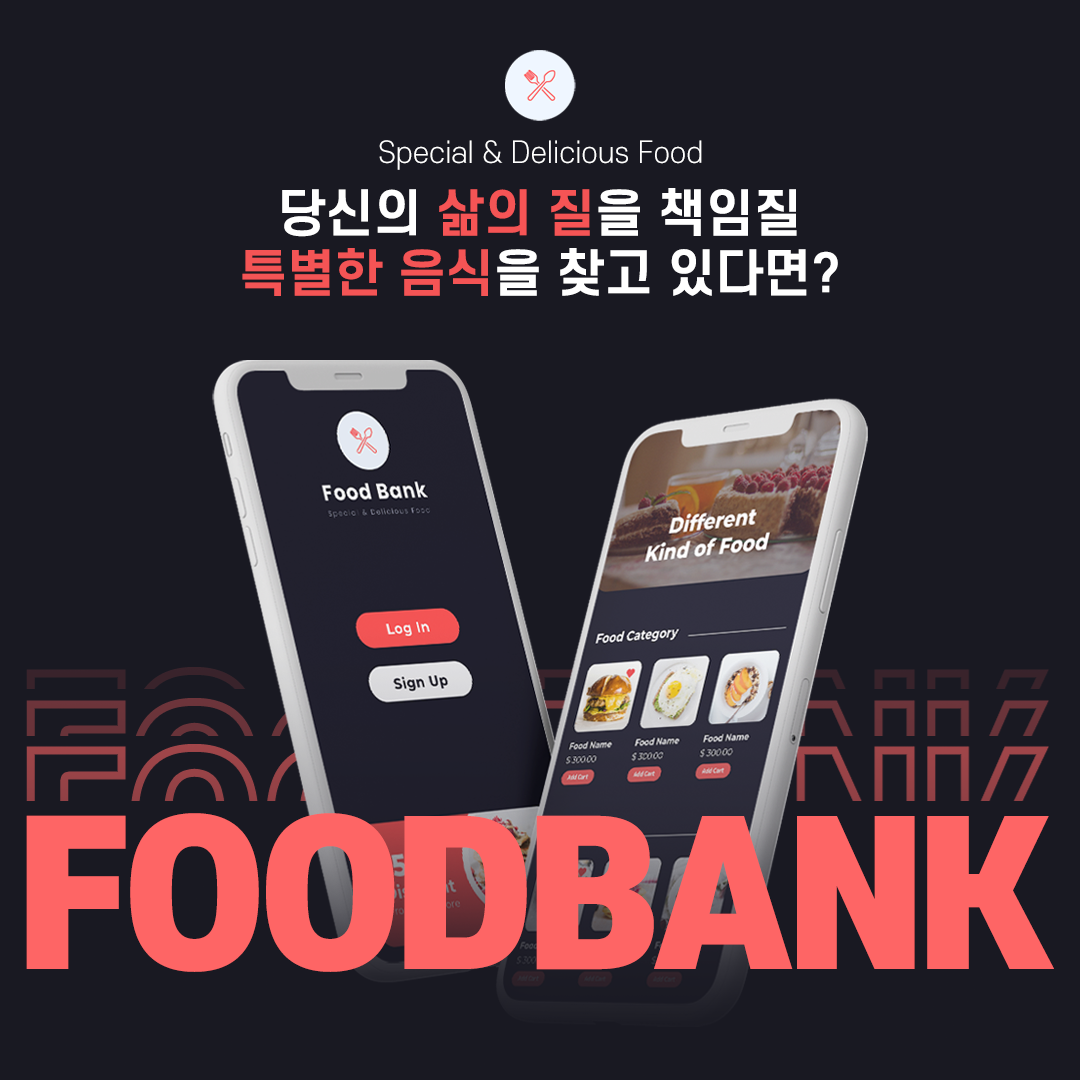
<style>
.page{position:relative;width:1080px;height:1080px;background:#191922}
.page>*{position:absolute;margin:0}
.t1{font:28.8px "S-CoreDream-3Light";color:#ffffff}
.t2{font:50px/60px "S-CoreDream-6Bold";color:#ffffff}
.t3{font:50px/60px "S-CoreDream-6Bold";color:#f55455}
.t4{font:50px/60px "S-CoreDream-6Bold";color:#f45455}
.t5{font:189.9px "S-CoreDream-9Black";letter-spacing:-0.03em;color:#fe6565}
</style>
<div class="page">
<p class="t1" style="left:379px;top:140px;width:323px;height:30px">Special &amp; Delicious Food</p>
<p class="t2" style="left:242px;top:188px;width:596px;height:108px;text-align:center">당신의 <span class="t3">삶의 질</span>을 책임질<br><span class="t4">특별한 음식</span>을 찾고 있다면?</p>
<p class="t5" style="left:26px;top:813px;width:1028px;height:159px">FOODBANK</p>
</div>
